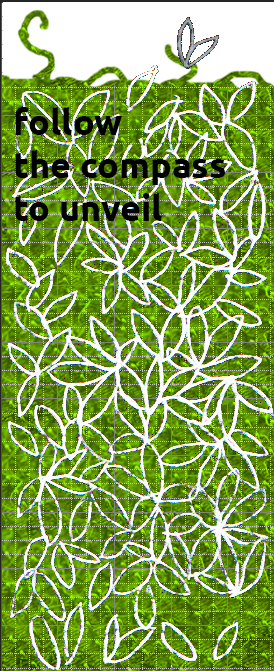
<style>
.page{position:relative;width:274px;height:671px}
.page>*{position:absolute;margin:0}
.t1{font:36px "Ubuntu-Bold";color:#000000}
</style>
<div class="page">
<p class="t1" style="left:15px;top:107px;width:210px;height:114px">follow<br>the compass<br>to unveil</p>
</div>
